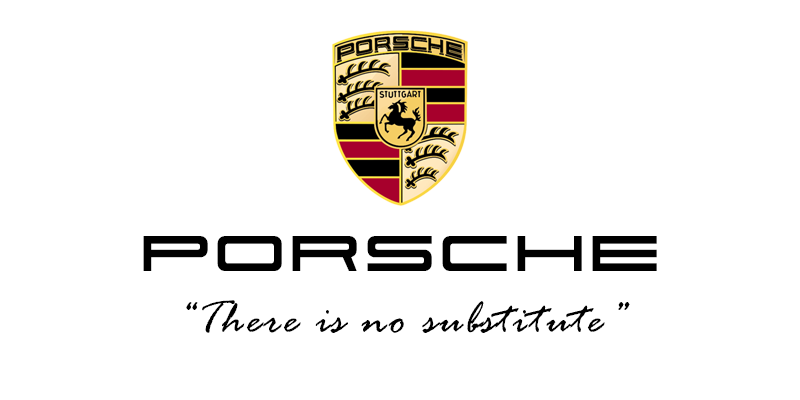
<style>
.page{position:relative;width:800px;height:400px;background:#ffffff}
.page>*{position:absolute;margin:0}
.t1{font:72px "911Porscha";letter-spacing:0.05em;color:#000000}
.t2{font:48px "RageItalic";letter-spacing:0.05em;color:#000000}
</style>
<div class="page">
<p class="t1" style="left:143px;top:236px;width:514px;height:35px">Porsche</p>
<p class="t2" style="left:186px;top:300px;width:444px;height:33px">“There is no substitute”</p>
</div>
